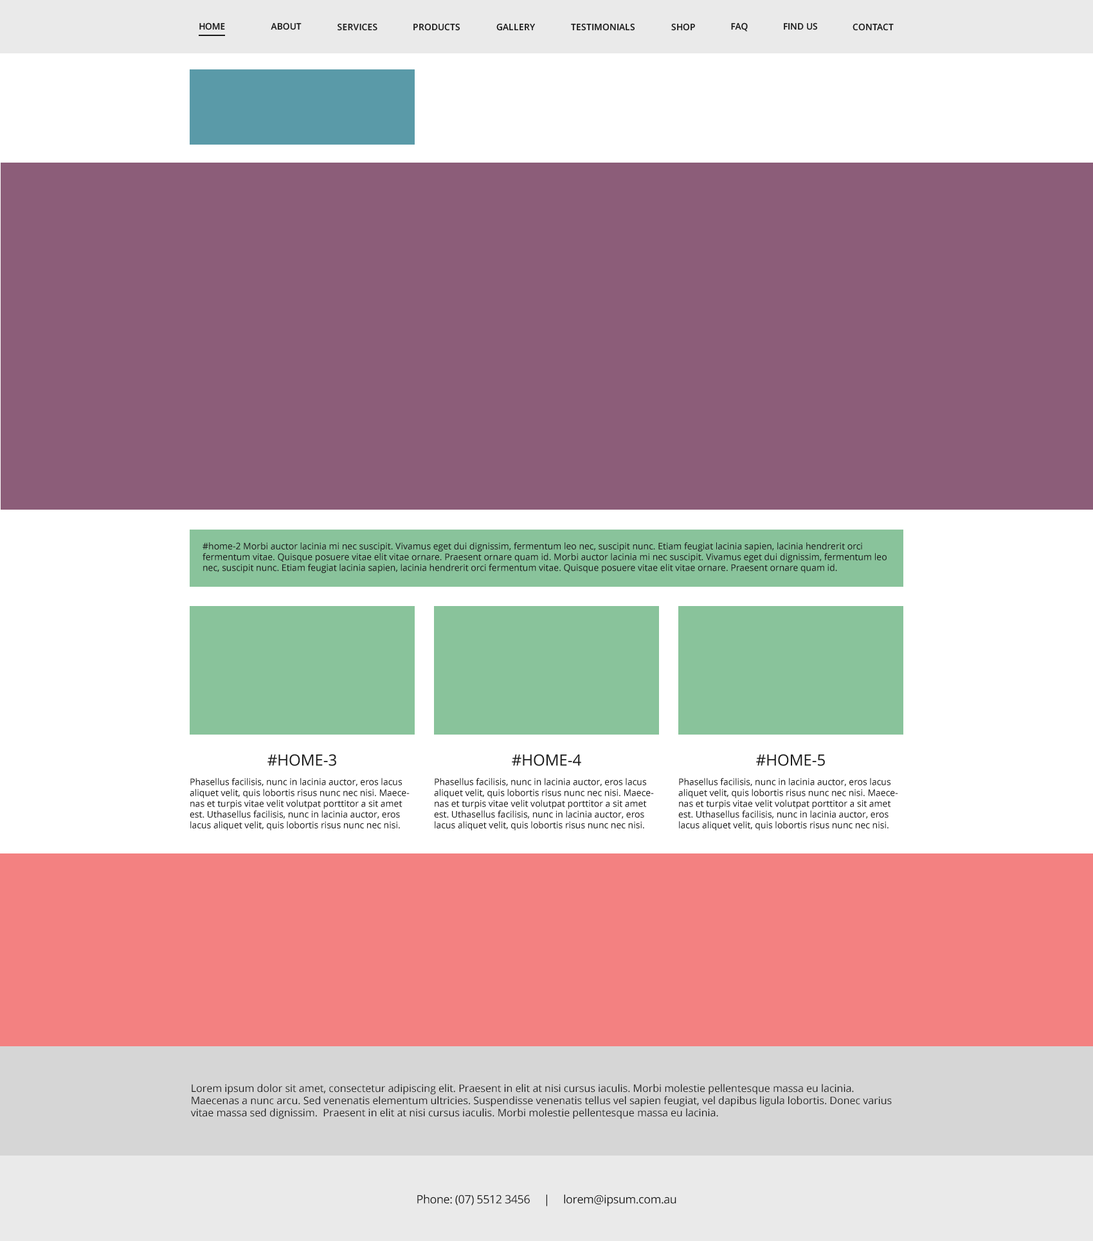
<style>
.page{position:relative;width:1093px;height:1241px;background:#8c5d79}
.page>*{position:absolute;margin:0}
.t1{font:9px "OpenSans-Semibold";letter-spacing:-0.015em;color:#1a1a1a;text-transform:uppercase}
.t2{font:9px "OpenSans-Semibold";color:#1a1a1a;text-transform:uppercase}
.t3{font:9px "OpenSans";color:#1a1a1a}
.t4{font:15.4px "OpenSans";color:#1a1a1a;text-transform:uppercase}
.t5{font:10.3px "OpenSans";color:#1a1a1a}
.t6{font:11.6px "OpenSans";letter-spacing:-0.025em;color:#1a1a1a}
</style>
<div class="page">
<p class="t1" style="left:199px;top:22px;width:26px;height:8px">Home</p>
<p class="t2" style="left:271px;top:22px;width:31px;height:8px">About</p>
<p class="t2" style="left:338px;top:23px;width:39px;height:8px">Services</p>
<p class="t2" style="left:413px;top:23px;width:47px;height:8px">Products</p>
<p class="t2" style="left:496px;top:23px;width:39px;height:8px">Gallery</p>
<p class="t2" style="left:571px;top:23px;width:64px;height:8px">Testimonials</p>
<p class="t2" style="left:671px;top:23px;width:24px;height:8px">Shop</p>
<p class="t2" style="left:731px;top:22px;width:17px;height:10px">FAQ</p>
<p class="t2" style="left:784px;top:22px;width:34px;height:8px">Find Us</p>
<p class="t2" style="left:852px;top:23px;width:42px;height:8px">Contact</p>
<p class="t3" style="left:203px;top:543px;width:684px;height:30px">#home-2 Morbi auctor lacinia mi nec suscipit. Vivamus eget dui dignissim, fermentum leo nec, suscipit nunc. Etiam feugiat lacinia sapien, lacinia hendrerit orci fermentum vitae. Quisque posuere vitae elit vitae ornare. Praesent ornare quam id. Morbi auctor lacinia mi nec suscipit. Vivamus eget dui dignissim, fermentum leo nec, suscipit nunc. Etiam feugiat lacinia sapien, lacinia hendrerit orci fermentum vitae. Quisque posuere vitae elit vitae ornare. Praesent ornare quam id.</p>
<p class="t4" style="left:267px;top:754px;width:69px;height:12px">#home-3</p>
<p class="t4" style="left:512px;top:754px;width:69px;height:12px">#home-4</p>
<p class="t4" style="left:756px;top:754px;width:69px;height:12px">#home-5</p>
<p class="t3" style="left:190px;top:778px;width:220px;height:53px">Phasellus facilisis, nunc in lacinia auctor, eros lacus aliquet velit, quis lobortis risus nunc nec nisi. Maecenas et turpis vitae velit volutpat porttitor a sit amet est. Uthasellus facilisis, nunc in lacinia auctor, eros lacus aliquet velit, quis lobortis risus nunc nec nisi.</p>
<p class="t3" style="left:434px;top:778px;width:220px;height:53px">Phasellus facilisis, nunc in lacinia auctor, eros lacus aliquet velit, quis lobortis risus nunc nec nisi. Maecenas et turpis vitae velit volutpat porttitor a sit amet est. Uthasellus facilisis, nunc in lacinia auctor, eros lacus aliquet velit, quis lobortis risus nunc nec nisi.</p>
<p class="t3" style="left:678px;top:778px;width:220px;height:53px">Phasellus facilisis, nunc in lacinia auctor, eros lacus aliquet velit, quis lobortis risus nunc nec nisi. Maecenas et turpis vitae velit volutpat porttitor a sit amet est. Uthasellus facilisis, nunc in lacinia auctor, eros lacus aliquet velit, quis lobortis risus nunc nec nisi.</p>
<p class="t5" style="left:190px;top:1084px;width:702px;height:35px">Lorem ipsum dolor sit amet, consectetur adipiscing elit. Praesent in elit at nisi cursus iaculis. Morbi molestie pellentesque massa eu lacinia. Maecenas a nunc arcu. Sed venenatis elementum ultricies. Suspendisse venenatis tellus vel sapien feugiat, vel dapibus ligula lobortis. Donec varius vitae massa sed dignissim.  Praesent in elit at nisi cursus iaculis. Morbi molestie pellentesque massa eu lacinia.</p>
<p class="t6" style="left:417px;top:1194px;width:259px;height:13px">Phone: (07) 5512 3456     |     lorem@ipsum.com.au</p>
</div>
